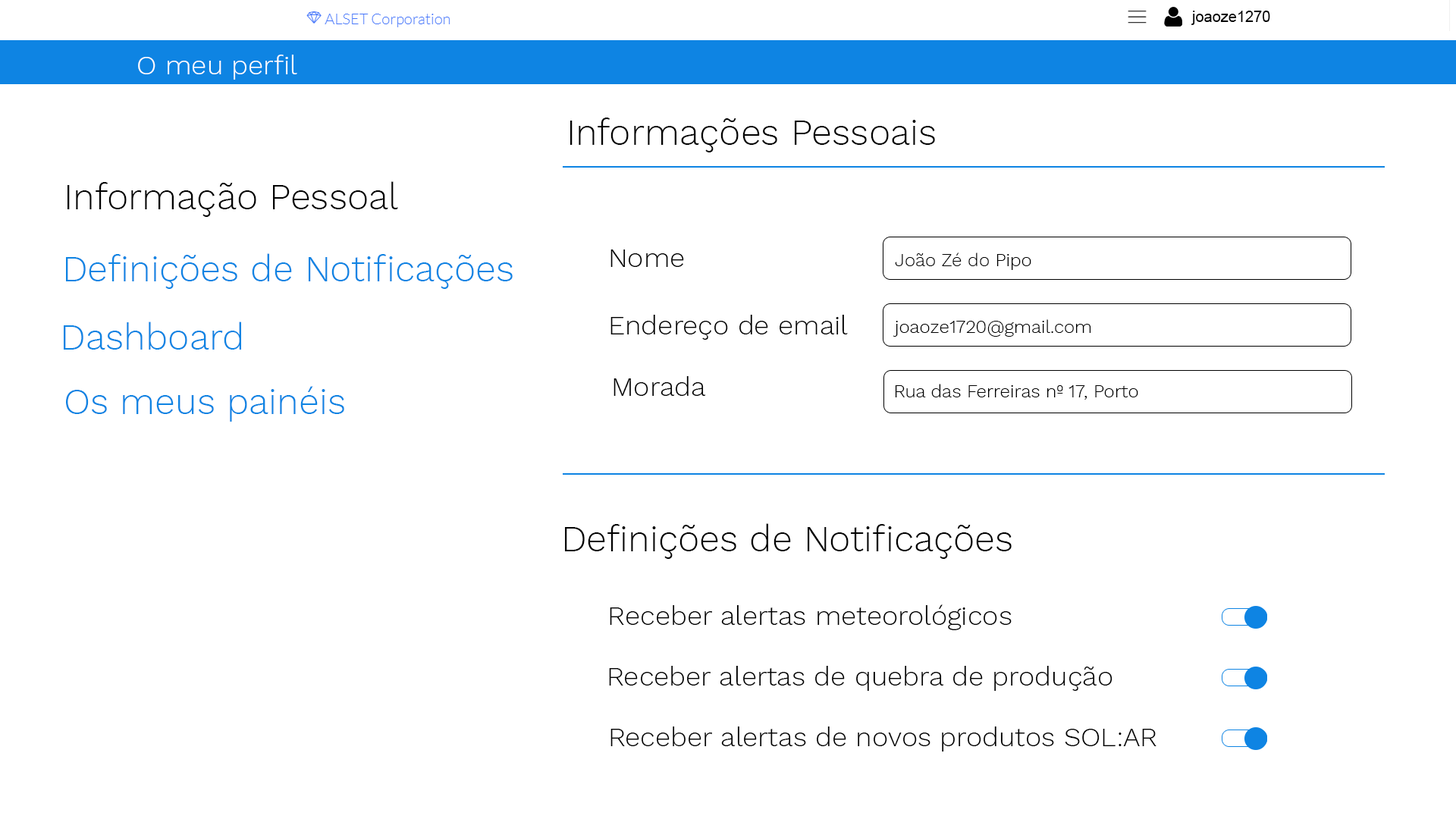
<style>
.page{position:relative;width:1456px;height:819px;background:#ffffff}
.page>*{position:absolute;margin:0}
.t1{font:27.3px "WorkSans-Light";color:#ffffff}
.t2{font:36.4px "WorkSans-Light";color:#000000}
.t3{font:36.4px "WorkSans-Light";color:#0e84e3}
.t4{font:27.3px "WorkSans-Light";color:#000000}
.t5{font:18.2px "WorkSans-Light";color:#000000}
</style>
<div class="page">
<p class="t1" style="left:138px;top:55px;width:159px;height:25px">O meu perfil</p>
<p class="t2" style="left:570px;top:118px;width:365px;height:34px">Informações Pessoais</p>
<p class="t2" style="left:67px;top:181px;width:331px;height:36px">Informação Pessoal</p>
<p class="t3" style="left:66px;top:253px;width:447px;height:36px">Definições de Notificações</p>
<p class="t4" style="left:610px;top:249px;width:74px;height:18px">Nome</p>
<p class="t5" style="left:895px;top:253px;width:136px;height:17px">João Zé do Pipo</p>
<p class="t4" style="left:610px;top:315px;width:238px;height:25px">Endereço de email</p>
<p class="t3" style="left:64px;top:322px;width:177px;height:28px">Dashboard</p>
<p class="t5" style="left:893px;top:319px;width:198px;height:18px">joaoze1720@gmail.com</p>
<p class="t4" style="left:613px;top:376px;width:93px;height:20px">Morada</p>
<p class="t3" style="left:66px;top:386px;width:278px;height:36px">Os meus painéis</p>
<p class="t5" style="left:895px;top:384px;width:243px;height:16px">Rua das Ferreiras nº 17, Porto</p>
<p class="t2" style="left:565px;top:523px;width:447px;height:36px">Definições de Notificações</p>
<p class="t4" style="left:610px;top:604px;width:402px;height:26px">Receber alertas meteorológicos</p>
<p class="t4" style="left:609px;top:666px;width:503px;height:25px">Receber alertas de quebra de produção</p>
<p class="t4" style="left:610px;top:726px;width:546px;height:25px">Receber alertas de novos produtos SOL:AR</p>
</div>
